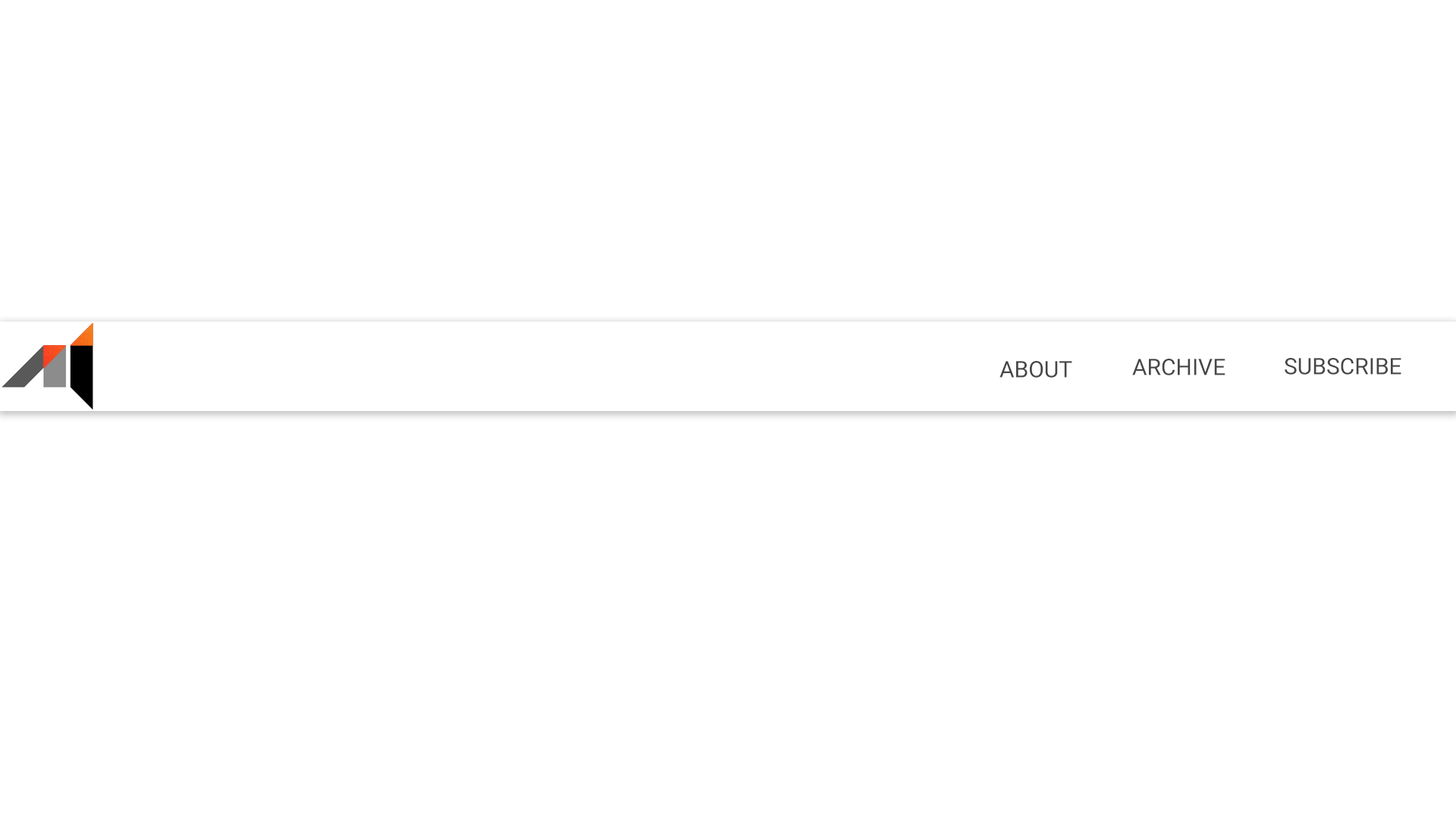
<style>
.page{position:relative;width:1456px;height:819px;background:#ffffff}
.page>*{position:absolute;margin:0}
.t1{font:22.7px "Roboto-Regular";color:#464646}
</style>
<div class="page">
<p class="t1" style="left:999px;top:361px;width:73px;height:17px">ABOUT</p>
<p class="t1" style="left:1132px;top:359px;width:93px;height:16px">ARCHIVE</p>
<p class="t1" style="left:1285px;top:358px;width:116px;height:17px">SUBSCRIBE</p>
</div>
